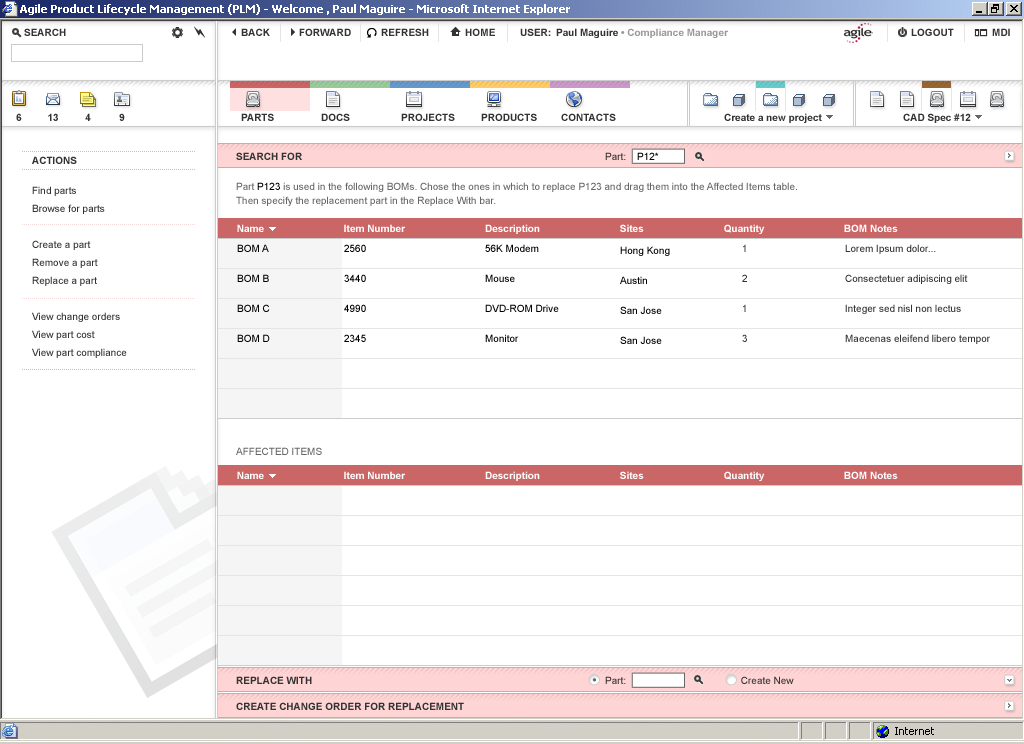
<style>
.page{position:relative;width:1024px;height:744px;background:#ffffff}
.page>*{position:absolute;margin:0}
.t1{font:10px "Arial-BoldMT";color:#333333}
.t2{font:10px "ArialMT"}
.t3{font:10px "ArialMT";color:#000000}
.t4{font:10px/14px "ArialMT";color:#666666}
.t5{font:10px/14px "ArialMT";color:#000000}
.t6{font:10px/18px "ArialMT";color:#333333}
.t7{font:10px "Arial-BoldMT";color:#ffffff}
.t8{font:10px/10px "ArialMT";color:#000000}
.t9{font:10px/10px "ArialMT";color:#333333}
.t10{font:10px "ArialMT";color:#666666}
.t11{font:10px "ArialMT";color:#333333}
</style>
<div class="page">
<p class="t1" style="left:32px;top:156px;width:45px;height:8px">ACTIONS</p>
<p class="t1" style="left:236px;top:152px;width:66px;height:8px">SEARCH FOR</p>
<p class="t2" style="left:605px;top:152px;width:21px;height:8px">Part:</p>
<p class="t3" style="left:637px;top:152px;width:22px;height:8px">P12*</p>
<p class="t4" style="left:236px;top:182px;width:561px;height:24px">Part <span class="t5">P123</span> is used in the following BOMs. Chose the ones in which to replace P123 and drag them into the Affected Items table.<br>Then specify the replacement part in the Replace With bar.</p>
<p class="t6" style="left:32px;top:186px;width:95px;height:172px">Find parts<br>Browse for parts<br><br>Create a part<br>Remove a part<br>Replace a part<br><br>View change orders<br>View part cost<br>View part compliance</p>
<p class="t7" style="left:237px;top:224px;width:27px;height:8px">Name</p>
<p class="t7" style="left:344px;top:224px;width:62px;height:8px">Item Number</p>
<p class="t7" style="left:485px;top:224px;width:55px;height:10px">Description</p>
<p class="t7" style="left:620px;top:224px;width:24px;height:8px">Sites</p>
<p class="t7" style="left:724px;top:224px;width:41px;height:10px">Quantity</p>
<p class="t7" style="left:844px;top:224px;width:54px;height:8px">BOM Notes</p>
<p class="t8" style="left:237px;top:244px;width:33px;height:98px">BOM A<br><br><br>BOM B<br><br><br>BOM C<br><br><br>BOM D</p>
<p class="t8" style="left:344px;top:244px;width:22px;height:98px">2560<br><br><br>3440<br><br><br>4990<br><br><br>2345</p>
<p class="t8" style="left:485px;top:244px;width:74px;height:98px">56K Modem<br><br><br>Mouse<br><br><br>DVD-ROM Drive<br><br><br>Monitor</p>
<p class="t8" style="left:620px;top:246px;width:50px;height:98px">Hong Kong<br><br><br>Austin<br><br><br>San Jose<br><br><br>San Jose</p>
<p class="t9" style="left:742px;top:244px;width:5px;height:98px">1<br><br><br>2<br><br><br>1<br><br><br>3</p>
<p class="t9" style="left:845px;top:244px;width:145px;height:100px">Lorem Ipsum dolor...<br><br><br>Consectetuer adipiscing elit<br><br><br>Integer sed nisl non lectus<br><br><br>Maecenas eleifend libero tempor</p>
<p class="t10" style="left:236px;top:447px;width:86px;height:8px">AFFECTED ITEMS</p>
<p class="t7" style="left:237px;top:471px;width:27px;height:8px">Name</p>
<p class="t7" style="left:344px;top:471px;width:62px;height:8px">Item Number</p>
<p class="t7" style="left:485px;top:471px;width:55px;height:10px">Description</p>
<p class="t7" style="left:620px;top:471px;width:24px;height:8px">Sites</p>
<p class="t7" style="left:724px;top:471px;width:41px;height:10px">Quantity</p>
<p class="t7" style="left:844px;top:471px;width:54px;height:8px">BOM Notes</p>
<p class="t1" style="left:236px;top:676px;width:76px;height:8px">REPLACE WITH</p>
<p class="t11" style="left:605px;top:676px;width:189px;height:8px">Part:             Create New</p>
<p class="t1" style="left:236px;top:702px;width:228px;height:8px">CREATE CHANGE ORDER FOR REPLACEMENT</p>
</div>
